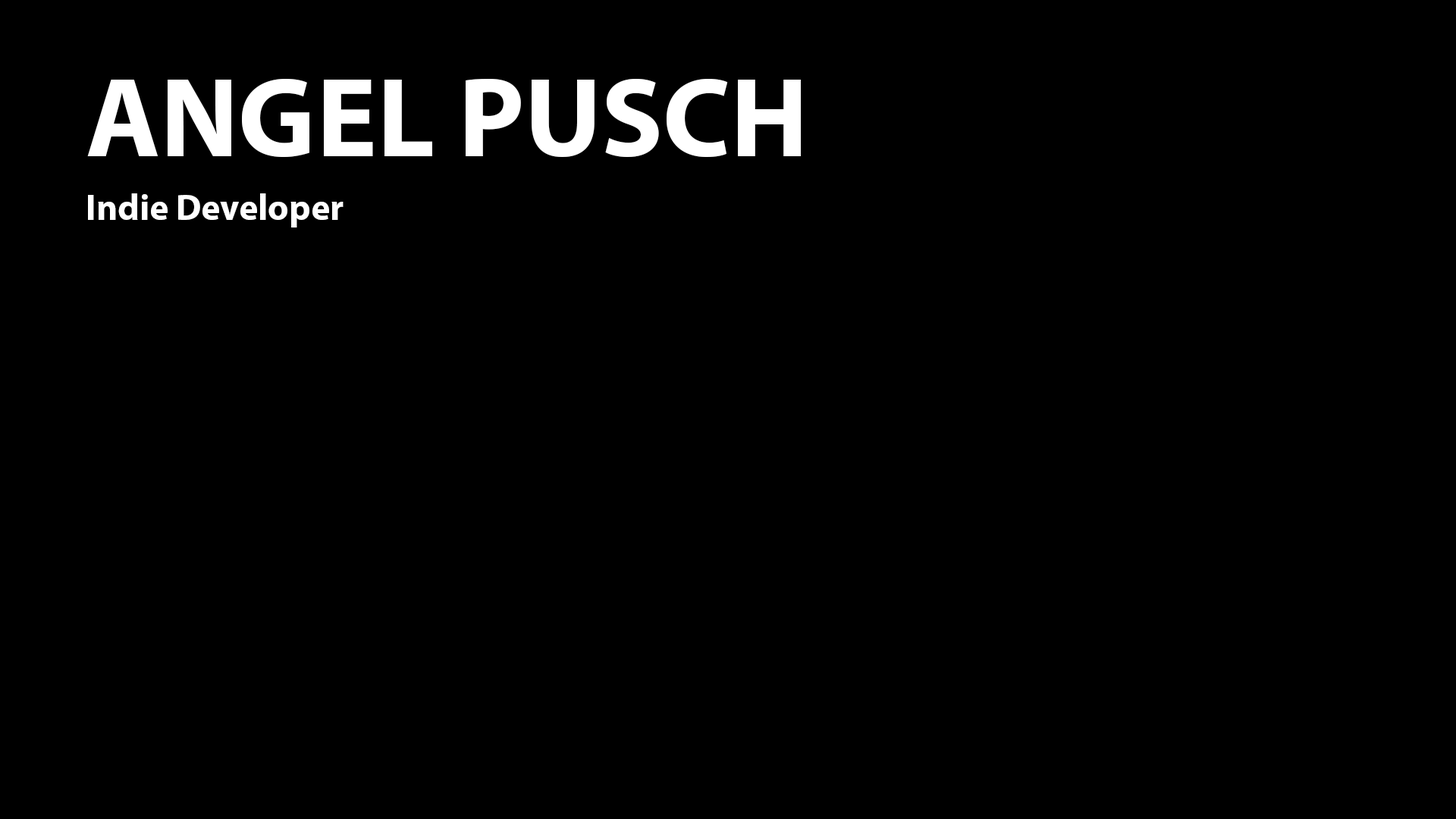
<style>
.page{position:relative;width:1456px;height:819px;background:#000000}
.page>*{position:absolute;margin:0}
.t1{font:113.7px "MyriadPro-Bold";color:#ffffff}
.t2{font:36.4px "MyriadPro-Bold";color:#ffffff}
</style>
<div class="page">
<p class="t1" style="left:87px;top:79px;width:714px;height:78px">ANGEL PUSCH</p>
<p class="t2" style="left:88px;top:193px;width:256px;height:34px">Indie Developer</p>
</div>
